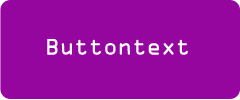
<style>
.page{position:relative;width:240px;height:100px;background:#95069e}
.page>*{position:absolute;margin:0}
.t1{font:24px "OCRAExtended";color:#fffeff}
</style>
<div class="page">
<p class="t1" style="left:47px;top:39px;width:141px;height:16px">Buttontext</p>
</div>
